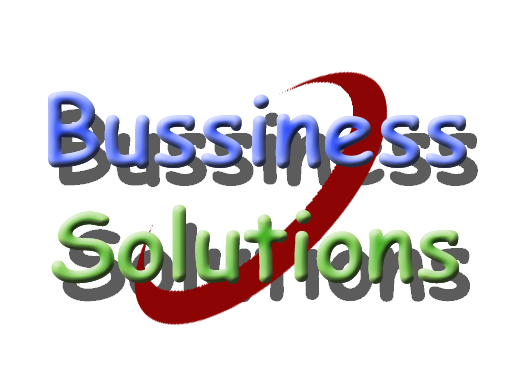
<style>
.page{position:relative;width:512px;height:384px;background:#ffffff}
.page>*{position:absolute;margin:0}
.t1{font:96px "ComicSansMS-Bold"}
</style>
<div class="page">
<p class="t1" style="left:48px;top:91px;width:419px;height:193px;text-align:center">Bussiness<br>Solutions</p>
<p class="t1" style="left:48px;top:91px;width:419px;height:193px;text-align:center">Bussiness<br>Solutions</p>
</div>
